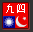
<style>
.page{position:relative;width:33px;height:32px;background:#f20000}
.page>*{position:absolute;margin:0}
.t1{font:10.4px "SimSun";color:#ffffff}
</style>
<div class="page">
<p class="t1" style="left:6px;top:4px;width:19px;height:9px">九四</p>
</div>
